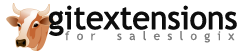
<style>
.page{position:relative;width:241px;height:54px;background:#ffffff}
.page>*{position:absolute;margin:0}
.t1{font:32px "TrebuchetMS";letter-spacing:-0.025em;color:#0d0d0d;font-weight:bold}
.t2{font:12px "TrebuchetMS";letter-spacing:-0.025em;color:#7e7e7e;font-weight:bold}
</style>
<div class="page">
<p class="t1" style="left:48px;top:5px;width:189px;height:31px">gitextensions</p>
<p class="t2" style="left:65px;top:31px;width:170px;height:12px">f  o  r      s  a  l  e  s  l  o  g  i  x</p>
</div>
